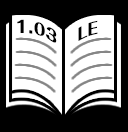
<style>
.page{position:relative;width:128px;height:132px;background:#000000}
.page>*{position:absolute;margin:0}
.t1{font:16px "FolkPro-Heavy";color:#000000}
</style>
<div class="page">
<p class="t1" style="left:17px;top:19px;width:40px;height:24px">1.03</p>
<p class="t1" style="left:78px;top:20px;width:20px;height:21px">LE</p>
</div>
